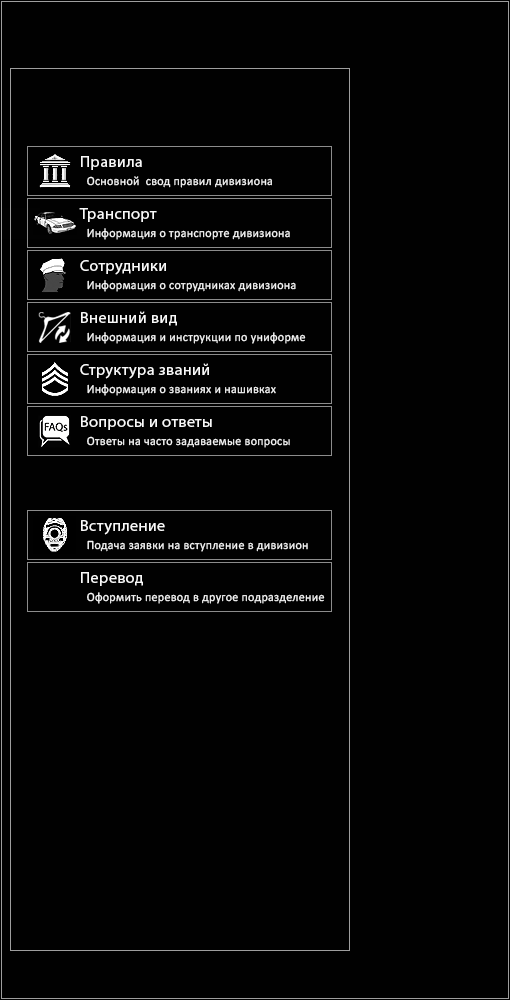
<style>
.page{position:relative;width:510px;height:1000px;background:#010101}
.page>*{position:absolute;margin:0}
.t1{font:15.8px "MyriadPro-Regular";letter-spacing:0.02em;color:#f9f9f9;scale:1.03 1}
.t2{font:12.6px "Calibri";letter-spacing:0.02em;color:#f9f9f9;scale:0.96 1}
</style>
<div class="page">
<p class="t1" style="left:81px;top:156px;width:61px;height:14px">Правила</p>
<p class="t2" style="left:87px;top:176px;width:185px;height:12px">Основной  свод правил дивизиона</p>
<p class="t1" style="left:79px;top:208px;width:78px;height:14px">Транспорт</p>
<p class="t2" style="left:87px;top:228px;width:203px;height:12px">Информация о транспорте дивизиона</p>
<p class="t1" style="left:80px;top:260px;width:86px;height:15px">Сотрудники</p>
<p class="t2" style="left:87px;top:280px;width:209px;height:12px">Информация о сотрудниках дивизиона</p>
<p class="t1" style="left:81px;top:311px;width:96px;height:15px">Внешний вид</p>
<p class="t2" style="left:87px;top:332px;width:219px;height:12px">Информация и инструкции по униформе</p>
<p class="t1" style="left:80px;top:363px;width:129px;height:16px">Структура званий</p>
<p class="t2" style="left:87px;top:384px;width:189px;height:12px">Информация о званиях и нашивках</p>
<p class="t1" style="left:81px;top:416px;width:131px;height:14px">Вопросы и ответы</p>
<p class="t2" style="left:87px;top:436px;width:203px;height:12px">Ответы на часто задаваемые вопросы</p>
<p class="t1" style="left:81px;top:520px;width:84px;height:15px">Вступление</p>
<p class="t2" style="left:87px;top:540px;width:221px;height:12px">Подача заявки на вступление в дивизион</p>
<p class="t1" style="left:81px;top:572px;width:62px;height:14px">Перевод</p>
<p class="t2" style="left:87px;top:592px;width:238px;height:12px">Оформить перевод в другое подразделение</p>
</div>
